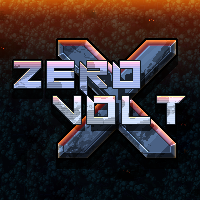
<style>
.page{position:relative;width:200px;height:200px}
.page>*{position:absolute;margin:0}
.t1{font:53.4px "Super-glue"}
.t2{font:56.2px "Super-glue"}
</style>
<div class="page">
<p class="t1" style="left:14px;top:61px;width:126px;height:34px">ZERO</p>
<p class="t2" style="left:53px;top:96px;width:132px;height:28px">VOLT</p>
</div>
